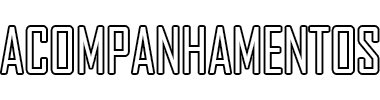
<style>
.page{position:relative;width:380px;height:100px;background:#ffffff}
.page>*{position:absolute;margin:0}
.t1{font:60px "AgencyFB-Reg";color:#ffffff}
</style>
<div class="page">
<p class="t1" style="left:1px;top:27px;width:377px;height:46px">ACOMPANHAMENTOS</p>
</div>
